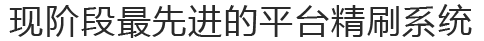
<style>
.page{position:relative;width:484px;height:41px;background:#ffffff}
.page>*{position:absolute;margin:0}
.t1{font:34px "MicrosoftYaHei";letter-spacing:0.05em;color:#2a2a2a}
</style>
<div class="page">
<p class="t1" style="left:9px;top:4px;width:463px;height:34px">现阶段最先进的平台精刷系统</p>
</div>
